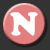
<style>
.page{position:relative;width:50px;height:50px;background:#333333}
.page>*{position:absolute;margin:0}
.t1{font:33.3px "CooperBlack";letter-spacing:0.1em;color:#ffffff}
</style>
<div class="page">
<p class="t1" style="left:10px;top:12px;width:28px;height:24px">N</p>
</div>
